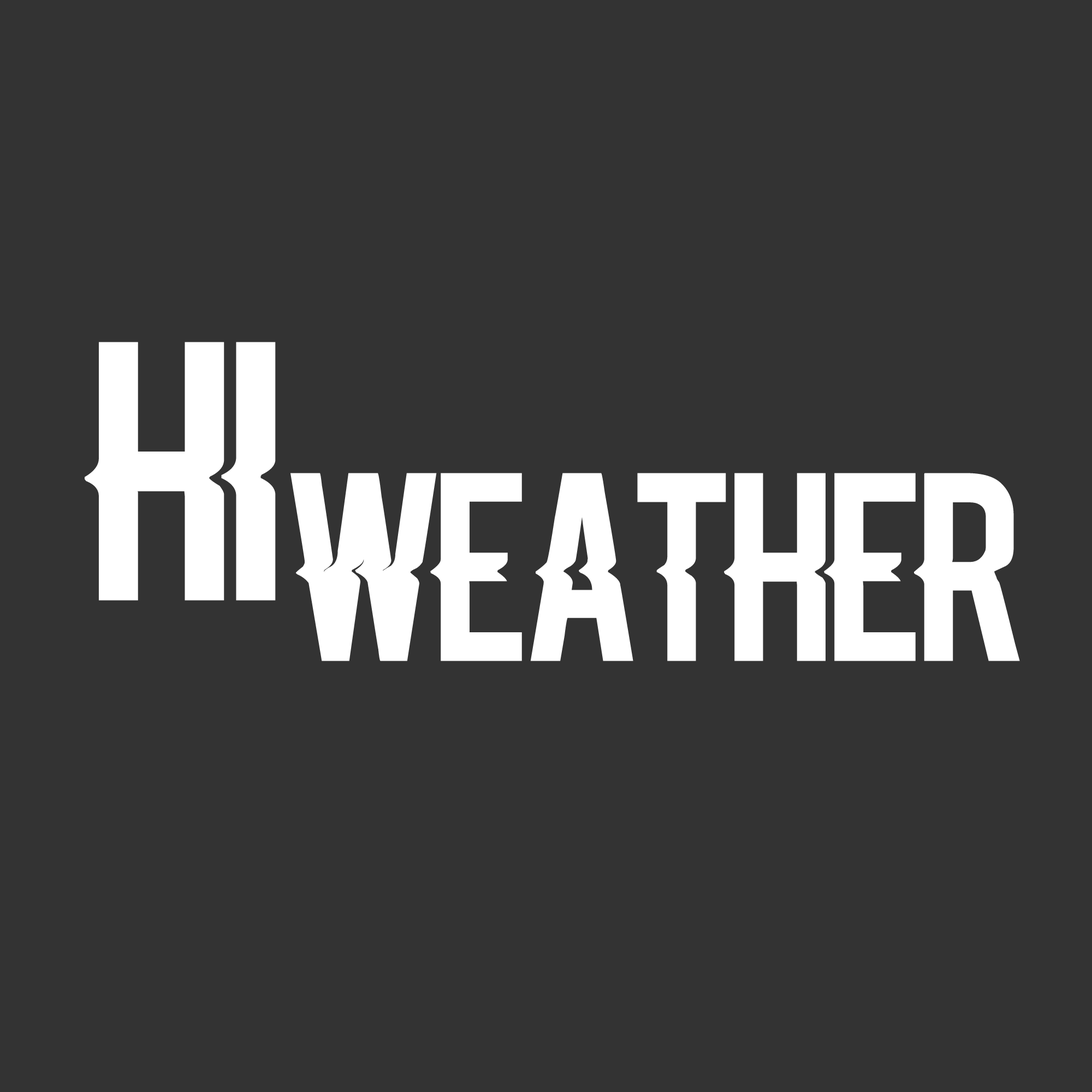
<style>
.page{position:relative;width:1092px;height:1092px;background:#333333}
.page>*{position:absolute;margin:0}
.t1{font:250.2px "Blacklisted";color:#ffffff}
.t2{font:182px "Blacklisted";color:#ffffff}
</style>
<div class="page">
<p class="t1" style="left:85px;top:342px;width:191px;height:259px">HI</p>
<p class="t2" style="left:290px;top:473px;width:730px;height:188px">Weather</p>
</div>
